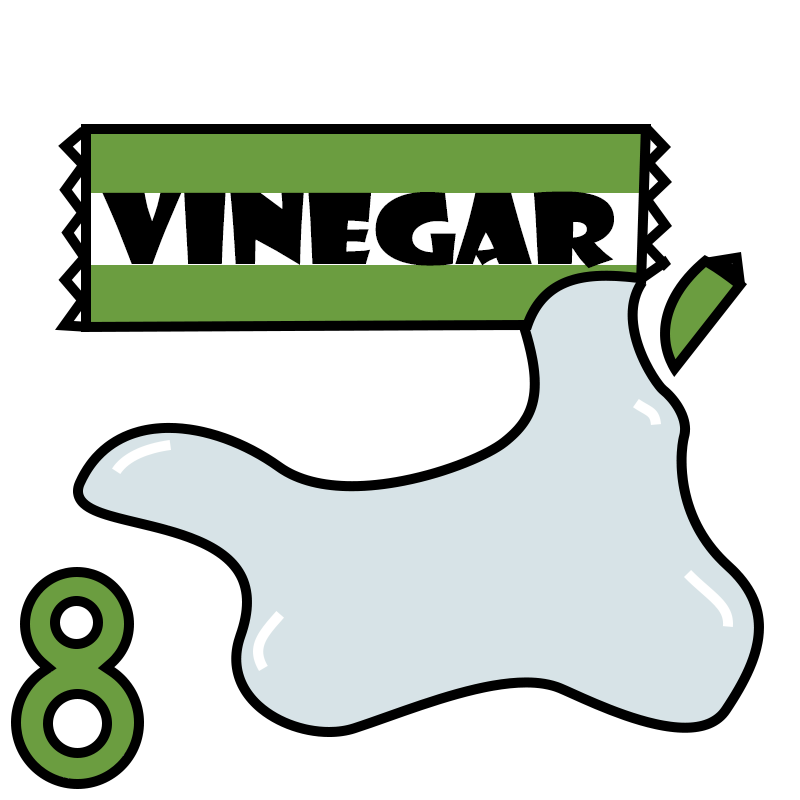
<style>
.page{position:relative;width:800px;height:800px;background:#ffffff}
.page>*{position:absolute;margin:0}
.t1{font:94.6px "ShowcardGothic-Reg";color:#000000;scale:1.29 1}
</style>
<div class="page">
<p class="t1" style="left:102px;top:191px;width:512px;height:78px">Vinegar</p>
</div>
